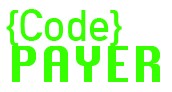
<style>
.page{position:relative;width:172px;height:92px;background:#ffffff}
.page>*{position:absolute;margin:0}
.t1{font:44px "DINAlternate-Bold";color:#36ff00}
.t2{font:48px "Silom";color:#36ff00}
</style>
<div class="page">
<p class="t1" style="left:6px;top:9px;width:116px;height:37px">{Code}</p>
<p class="t2" style="left:12px;top:46px;width:148px;height:36px">PAYER</p>
</div>
